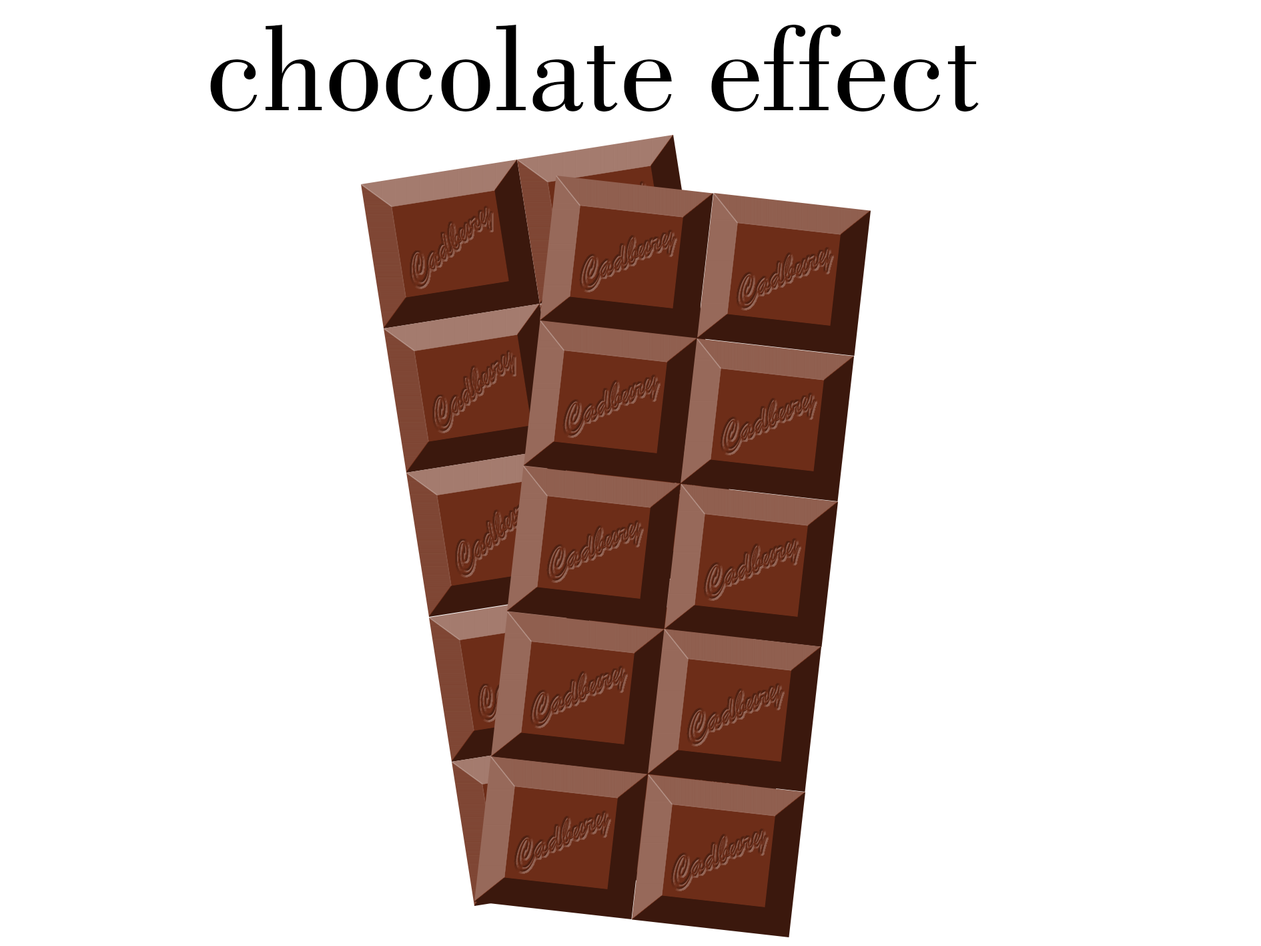
<style>
.page{position:relative;width:1261px;height:946px;background:#ffffff}
.page>*{position:absolute;margin:0}
.t1{font:127.9px "BodoniBT-Book";color:#000000}
</style>
<div class="page">
<p class="t1" style="left:210px;top:25px;width:769px;height:86px">chocolate effect</p>
</div>
